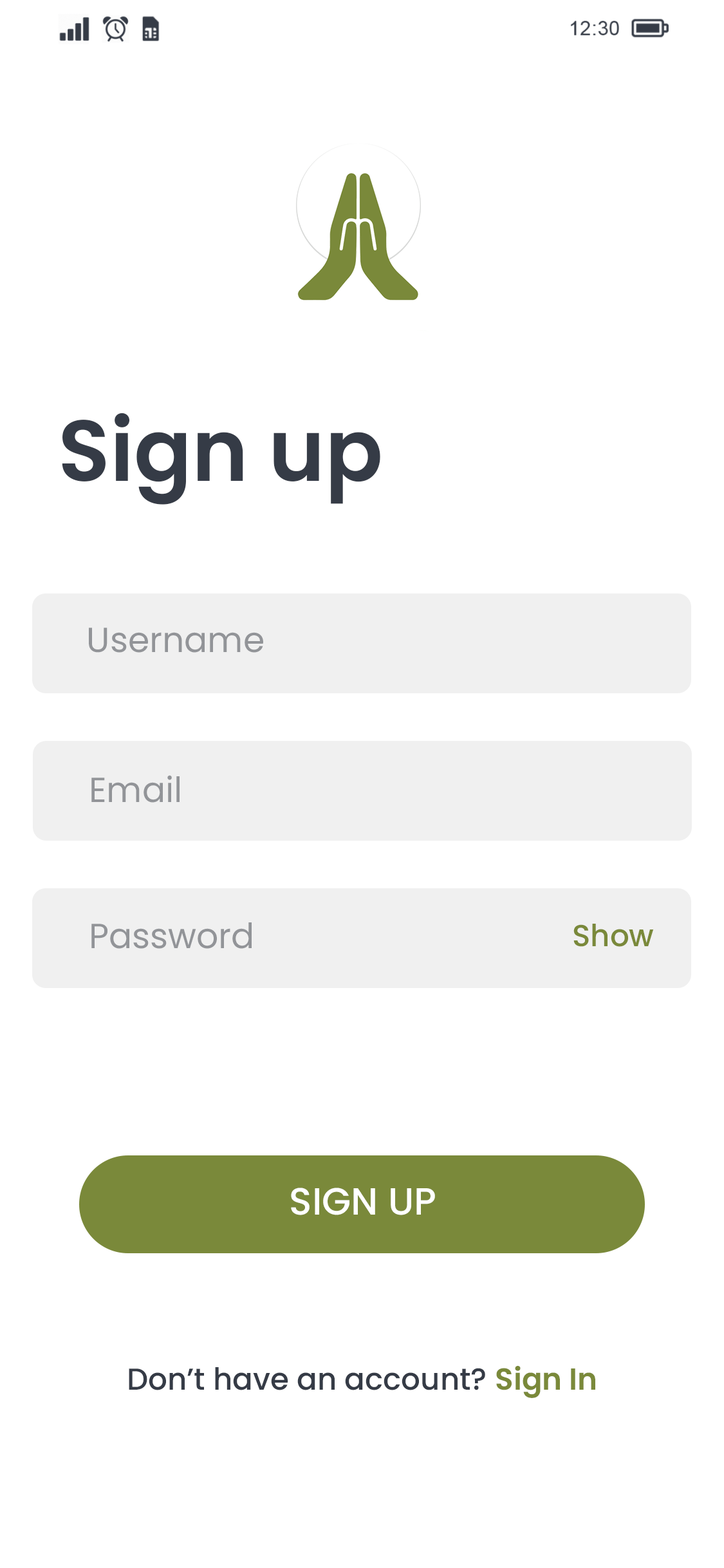
<style>
.page{position:relative;width:724px;height:1568px;background:#ffffff}
.page>*{position:absolute;margin:0}
.t1{font:86.3px "Poppins-SemiBold";color:#353b46}
.t2{font:34.9px "Poppins-Regular";color:#929498}
.t3{font:30.4px "Poppins-Medium";color:#7a893a}
.t4{font:38px "Poppins-Medium";color:#ffffff}
.t5{font:30.4px "Poppins-Medium";color:#353b46}
.t6{font:30.4px "Poppins-SemiBold";color:#7a893a}
</style>
<div class="page">
<p class="t1" style="left:62px;top:413px;width:318px;height:92px">Sign up</p>
<p class="t2" style="left:89px;top:628px;width:174px;height:25px">Username</p>
<p class="t2" style="left:91px;top:775px;width:89px;height:28px">Email</p>
<p class="t2" style="left:91px;top:922px;width:161px;height:27px">Password</p>
<p class="t3" style="left:574px;top:924px;width:80px;height:23px">Show</p>
<p class="t4" style="left:291px;top:1188px;width:144px;height:27px">SIGN UP</p>
<p class="t5" style="left:129px;top:1366px;width:466px;height:32px">Don’t have an account? <span class="t6">Sign In</span></p>
</div>
